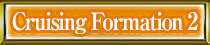
<style>
.page{position:relative;width:210px;height:45px}
.page>*{position:absolute;margin:0}
.t1{font:24px "RyuminPro-ExBold";letter-spacing:-0.08em;color:#ffffff;scale:0.9 1}
</style>
<div class="page">
<p class="t1" style="left:12px;top:12px;width:186px;height:22px">Cruising Formation 2</p>
</div>
